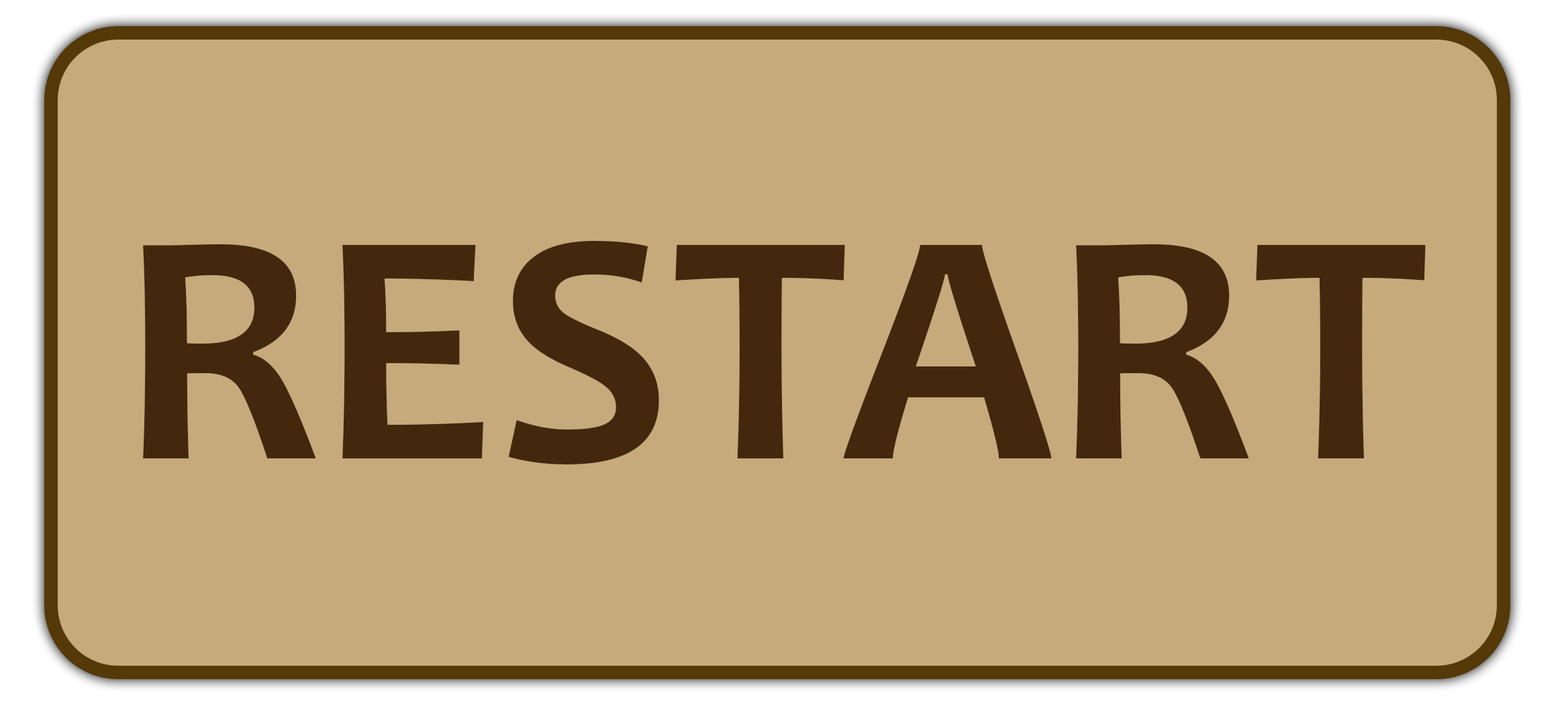
<style>
.page{position:relative;width:1568px;height:706px;background:#c6aa7b}
.page>*{position:absolute;margin:0}
.t1{font:335.6px "Candara-Bold";color:#43280d}
</style>
<div class="page">
<p class="t1" style="left:143px;top:241px;width:1283px;height:223px">RESTART</p>
</div>
